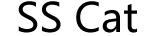
<style>
.page{position:relative;width:162px;height:36px;background:#ffffff}
.page>*{position:absolute;margin:0}
.t1{font:40px "MicrosoftYaHei";color:#000000}
</style>
<div class="page">
<p class="t1" style="left:18px;top:1px;width:119px;height:32px">SS Cat</p>
</div>
